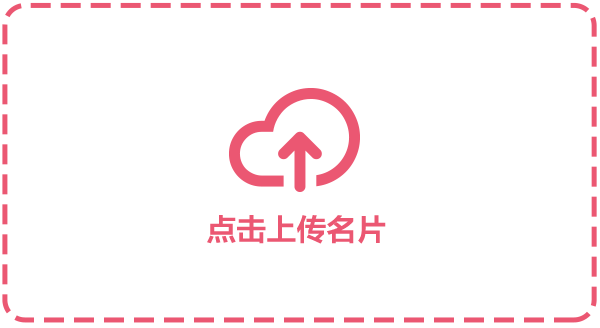
<style>
.page{position:relative;width:600px;height:328px;background:#ffffff}
.page>*{position:absolute;margin:0}
.t1{font:30px "FZLTZCHK--GBK1-0";color:#eb5772}
</style>
<div class="page">
<p class="t1" style="left:207px;top:215px;width:179px;height:29px">点击上传名片</p>
</div>
